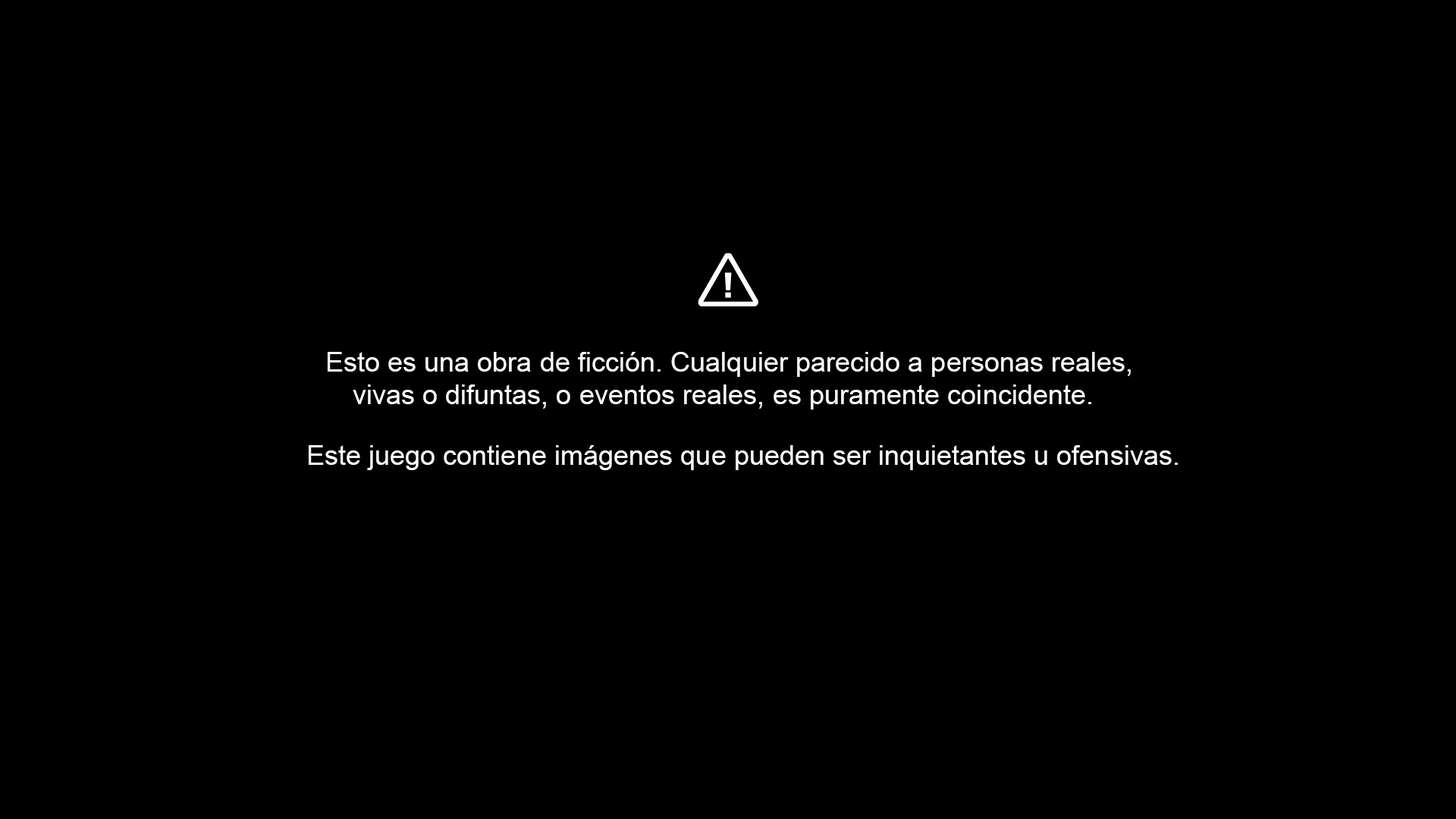
<style>
.page{position:relative;width:1456px;height:819px;background:#000000}
.page>*{position:absolute;margin:0}
.t1{font:27.4px "ArialMT";color:#ffffff}
</style>
<div class="page">
<p class="t1" style="left:328px;top:352px;width:803px;height:57px">Esto es una obra de ficción. Cualquier parecido a personas reales,<br> vivas o difuntas, o eventos reales, es puramente coincidente.</p>
<p class="t1" style="left:309px;top:445px;width:869px;height:25px">Este juego contiene imágenes que pueden ser inquietantes u ofensivas.</p>
</div>
